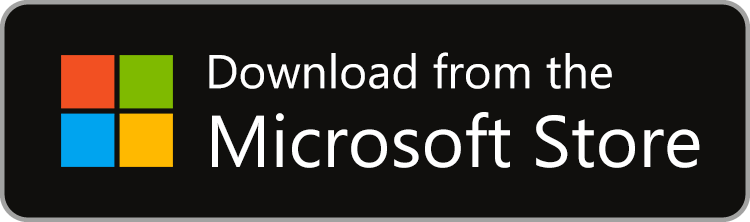
<style>
.page{position:relative;width:750px;height:222px;background:#100f0d}
.page>*{position:absolute;margin:0}
.t1{font:47.6px "SegoeUI";color:#ffffff}
.t2{font:73.1px "SegoeUI";color:#ffffff}
</style>
<div class="page">
<p class="t1" style="left:209px;top:52px;width:403px;height:37px">Download from the</p>
<p class="t2" style="left:212px;top:112px;width:488px;height:56px">Microsoft Store</p>
</div>
